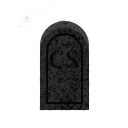
<style>
.page{position:relative;width:128px;height:128px;background:#ffffff}
.page>*{position:absolute;margin:0}
.t1{font:25px "MS Serif";color:#0b0806}
</style>
<div class="page">
<p class="t1" style="left:49px;top:50px;width:29px;height:18px">CS</p>
</div>
